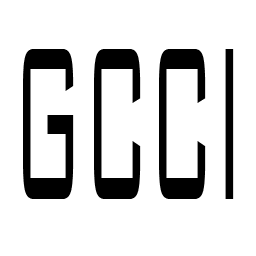
<style>
.page{position:relative;width:256px;height:256px;background:#ffffff}
.page>*{position:absolute;margin:0}
.t1{font:290.7px "BankGothicBT-Light";color:#000000;scale:0.3 1}
</style>
<div class="page">
<p class="t1" style="left:23px;top:49px;width:211px;height:150px">GCCI</p>
</div>
